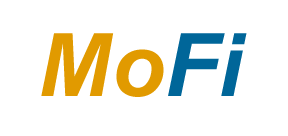
<style>
.page{position:relative;width:288px;height:136px;background:#ffffff}
.page>*{position:absolute;margin:0}
.t1{font:87.5px "Arial-BoldItalicMT";color:#e19a00}
.t2{font:87.5px "Arial-BoldItalicMT";color:#006699}
</style>
<div class="page">
<p class="t1" style="left:41px;top:33px;width:206px;height:64px">Mo<span class="t2">Fi</span></p>
</div>
